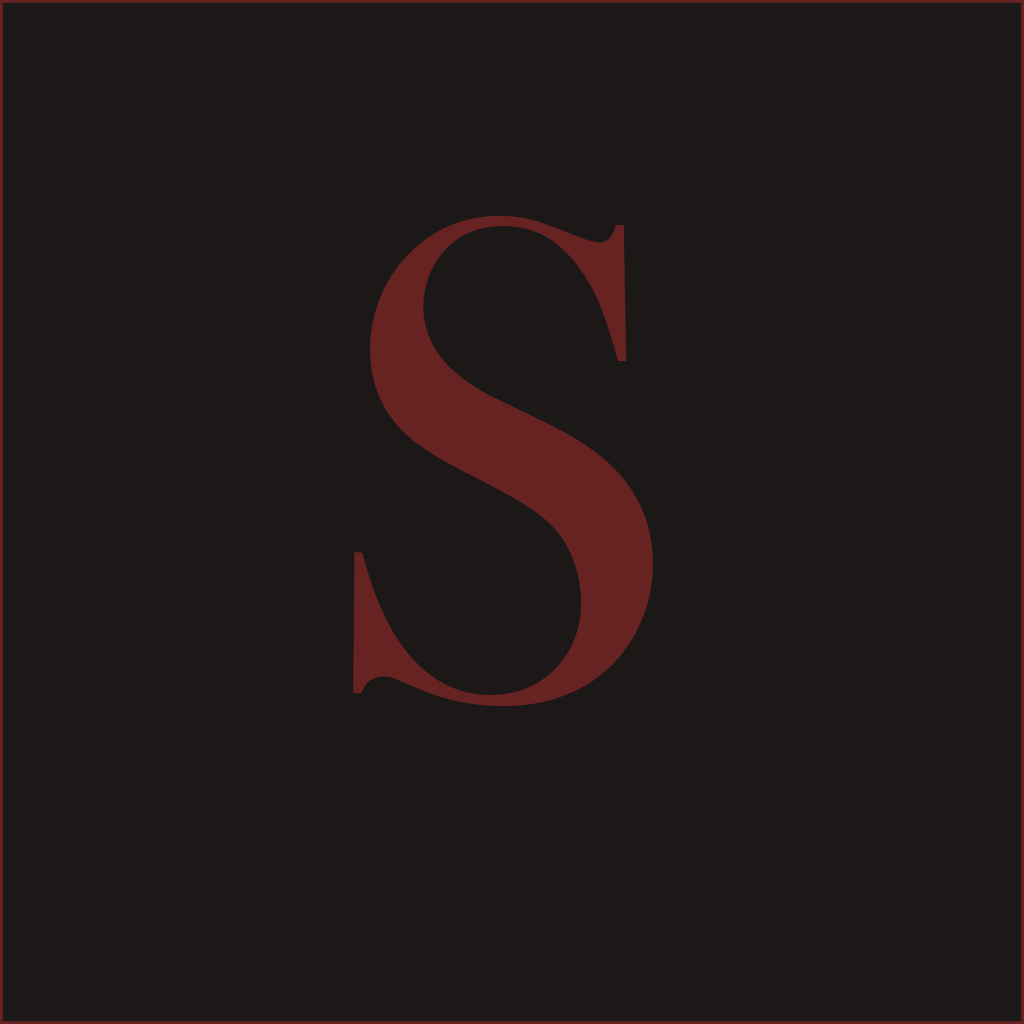
<style>
.page{position:relative;width:1024px;height:1024px;background:#1c1818}
.page>*{position:absolute;margin:0}
.t1{font:700px "BaskOldFace";color:#672222}
</style>
<div class="page">
<p class="t1" style="left:353px;top:215px;width:300px;height:491px">S</p>
</div>
